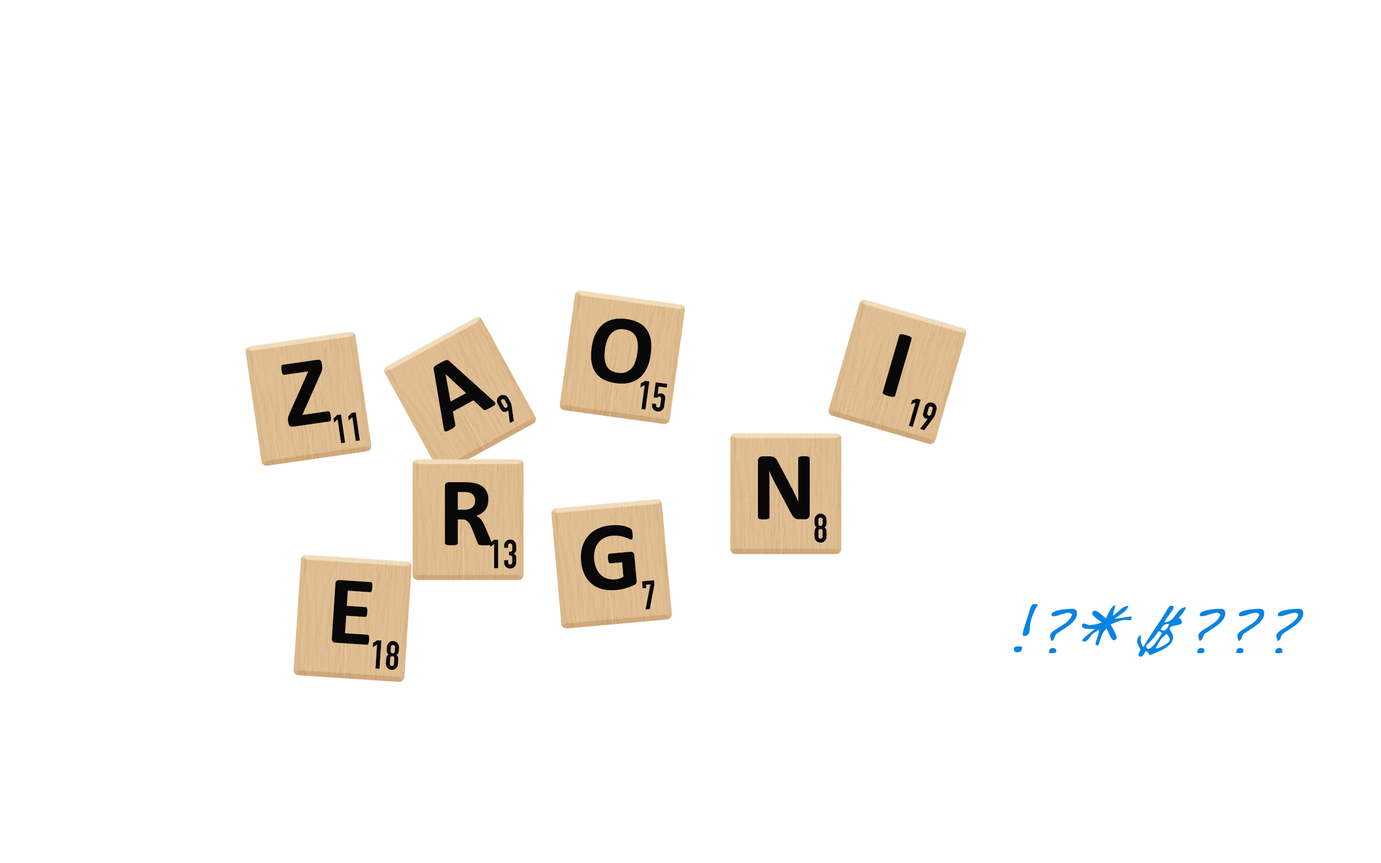
<style>
.page{position:relative;width:1381px;height:863px;background:#ffffff}
.page>*{position:absolute;margin:0}
.t1{font:99.3px "Calibri-Bold";color:#080808}
.t2{font:39.9px "DINCondensed-Bold";color:#080808}
.t3{font:69.1px "Handwriting-Dakota";color:#0784e3}
</style>
<div class="page">
<p class="t1" style="left:591px;top:318px;width:61px;height:66px;rotate:8deg">O</p>
<p class="t1" style="left:883px;top:334px;width:29px;height:63px;rotate:16deg">I</p>
<p class="t1" style="left:281px;top:360px;width:50px;height:67px;rotate:-8deg">Z</p>
<p class="t1" style="left:433px;top:360px;width:63px;height:72px;rotate:-29deg">A</p>
<p class="t2" style="left:640px;top:381px;width:27px;height:31px;rotate:8deg">15</p>
<p class="t2" style="left:497px;top:395px;width:17px;height:29px;rotate:-29deg">9</p>
<p class="t2" style="left:909px;top:399px;width:28px;height:32px;rotate:16deg">19</p>
<p class="t2" style="left:333px;top:412px;width:27px;height:32px;rotate:-8deg">11</p>
<p class="t1" style="left:758px;top:456px;width:52px;height:64px">N</p>
<p class="t1" style="left:445px;top:482px;width:47px;height:63px">R</p>
<p class="t2" style="left:814px;top:514px;width:13px;height:29px">8</p>
<p class="t1" style="left:581px;top:525px;width:56px;height:66px;rotate:-5deg">G</p>
<p class="t2" style="left:490px;top:540px;width:26px;height:29px">13</p>
<p class="t1" style="left:332px;top:580px;width:41px;height:65px;rotate:4deg">E</p>
<p class="t2" style="left:642px;top:580px;width:13px;height:30px;rotate:-5deg">7</p>
<p class="t3" style="left:1014px;top:604px;width:290px;height:53px">!?*$???</p>
<p class="t2" style="left:373px;top:640px;width:26px;height:30px;rotate:4deg">18</p>
</div>
